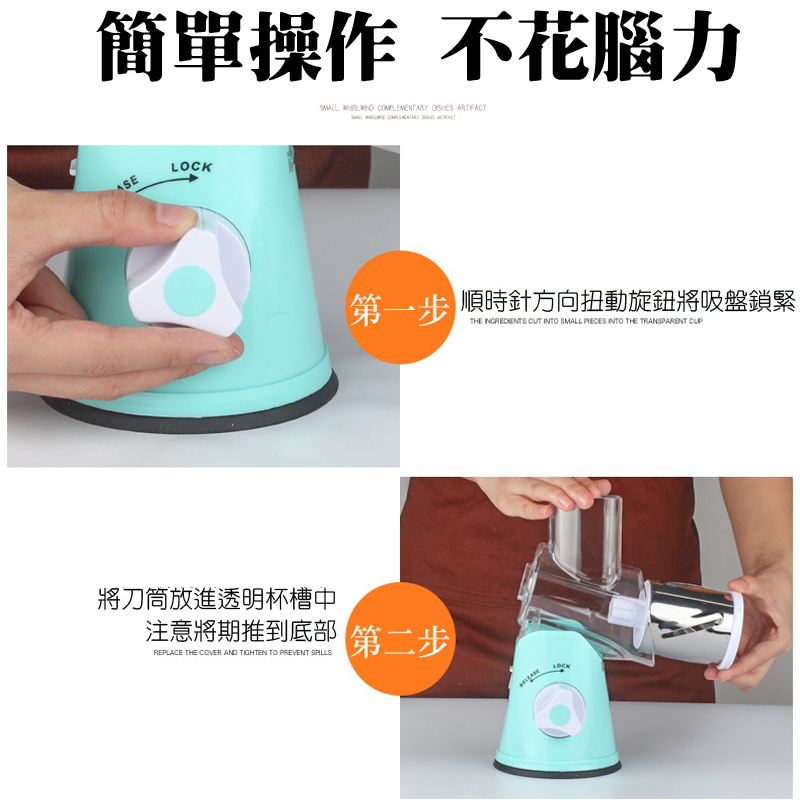
<style>
.page{position:relative;width:800px;height:800px;background:#ffffff}
.page>*{position:absolute;margin:0}
.t1{font:76.5px "HanWangMingBlack";color:#000000}
.t2{font:24px "HanWangYenLight";color:#000000}
</style>
<div class="page">
<p class="t1" style="left:96px;top:10px;width:644px;height:72px">簡單操作 不花腦力</p>
<p class="t2" style="left:461px;top:289px;width:335px;height:23px">順時針方向扭動旋鈕將吸盤鎖緊</p>
<p class="t2" style="left:98px;top:587px;width:239px;height:55px">將刀筒放進透明杯槽中<br>    注意將期推到底部</p>
</div>
